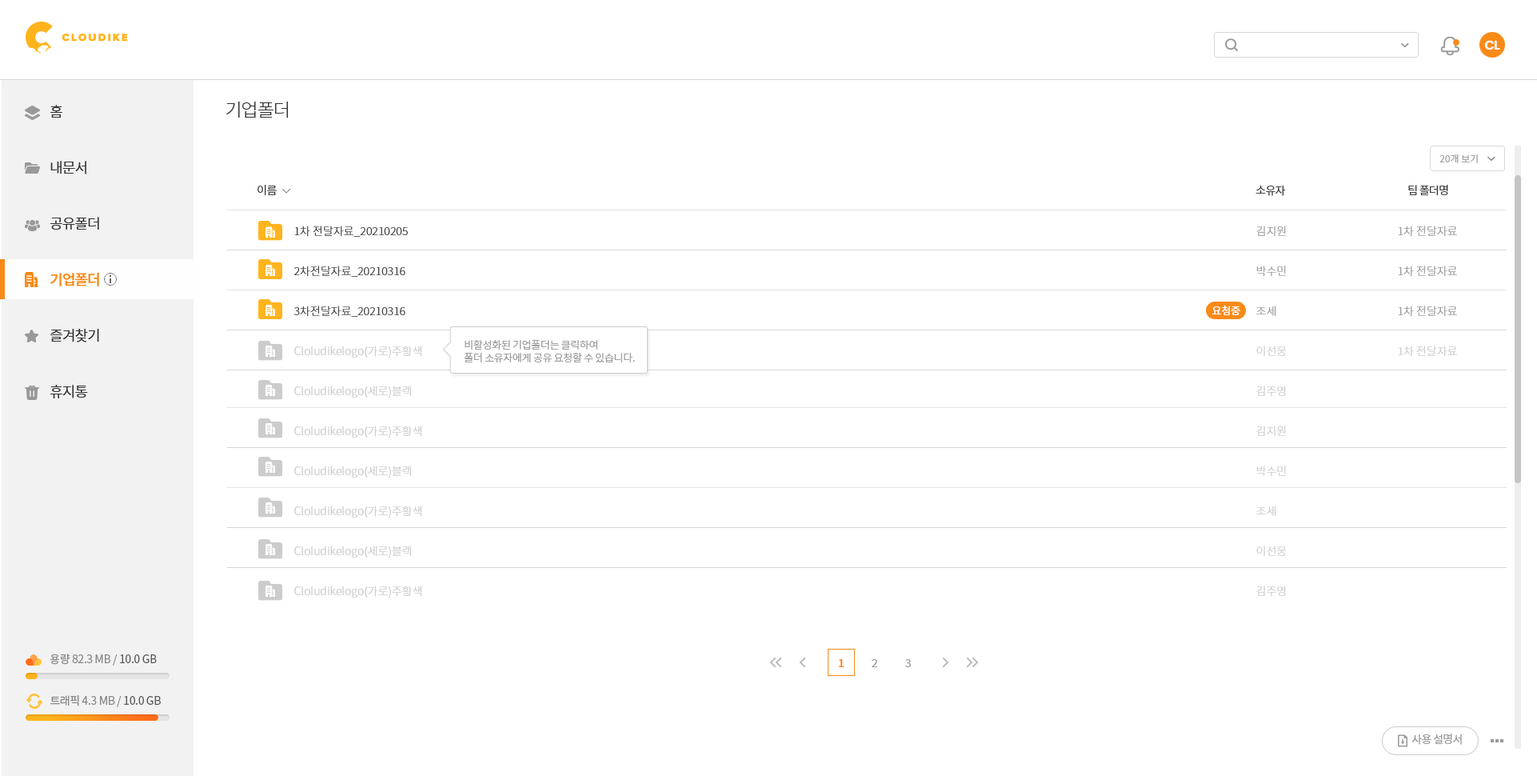
<style>
.page{position:relative;width:1537px;height:776px;background:#ffffff}
.page>*{position:absolute;margin:0}
.t1{font:12.8px "Poppins-SemiBold";letter-spacing:-0.05em;color:#ffffff}
.t2{font:18.4px "NotoSansCJKkr-Light";letter-spacing:-0.05em;color:#333333}
.t3{font:14.4px/56px "NotoSansCJKkr-DemiLight";letter-spacing:-0.05em;color:#333333}
.t4{font:14.4px/56px "NotoSansCJKkr-Medium";letter-spacing:-0.05em;color:#f98a17}
.t5{font:9.6px "NotoSansCJKkr-DemiLight";color:#a1a1a1}
.t6{font:11.2px "NotoSansCJKkr-DemiLight";letter-spacing:-0.05em;color:#333333}
.t7{font:11.2px/40px "NotoSansCJKkr-Light";color:#333333}
.t8{font:11.2px/40px "NotoSansCJKkr-Light";color:#cccccc}
.t9{font:11.2px/40px "NotoSansCJKkr-Light";color:#999999}
.t10{font:10.4px "NotoSansCJKkr-Medium";color:#ffffff}
.t11{font:10.4px/12.8px "NotoSansCJKkr-DemiLight";letter-spacing:-0.025em;color:#999999}
.t12{font:11.2px "NotoSansCJKkr-Regular";letter-spacing:-0.025em;color:#888888}
.t13{font:11.2px "NotoSansCJKkr-Regular";letter-spacing:-0.025em;color:#585858}
.t14{font:11.2px "NotoSansCJKkr-Medium";color:#f98a17}
.t15{font:11.2px "NotoSansCJKkr-DemiLight";color:#999999}
.t16{font:11.2px "NotoSansCJKkr-Regular";letter-spacing:-0.05em;color:#999999}
</style>
<div class="page">
<p class="t1" style="left:1484px;top:40px;width:16px;height:10px">CL</p>
<p class="t2" style="left:226px;top:101px;width:62px;height:17px">기업폴더</p>
<p class="t3" style="left:50px;top:105px;width:49px;height:293px">홈<br>내문서<br>공유폴더<br><span class="t4">기업폴더<br></span>즐겨찾기<br>휴지통</p>
<p class="t5" style="left:1440px;top:154px;width:38px;height:9px">20개 보기</p>
<p class="t6" style="left:258px;top:185px;width:19px;height:10px">이름</p>
<p class="t6" style="left:1256px;top:185px;width:29px;height:11px">소유자</p>
<p class="t6" style="left:1408px;top:185px;width:40px;height:10px">팀 폴더명</p>
<p class="t7" style="left:294px;top:226px;width:114px;height:91px">1차 전달자료_20210205<br>2차전달자료_20210316<br>3차전달자료_20210316</p>
<p class="t8" style="left:1256px;top:226px;width:31px;height:371px"><span class="t9">김지원<br>박수민<br>조세<br></span>이선웅<br>김주영<br>김지원<br>박수민<br>조세<br>이선웅<br>김주영</p>
<p class="t9" style="left:1398px;top:226px;width:59px;height:131px">1차 전달자료<br>1차 전달자료<br>1차 전달자료<br><span class="t8">1차 전달자료</span></p>
<p class="t10" style="left:1212px;top:306px;width:28px;height:9px">요청중</p>
<p class="t11" style="left:464px;top:340px;width:171px;height:23px">비활성화된 기업폴더는 클릭하여<br>폴더 소유자에게 공유 요청할 수 있습니다.</p>
<p class="t8" style="left:294px;top:345px;width:127px;height:252px">Cloludikelogo(가로)주황색<br>Cloludikelogo(세로)블랙<br>Cloludikelogo(가로)주황색<br>Cloludikelogo(세로)블랙<br>Cloludikelogo(가로)주황색<br>Cloludikelogo(세로)블랙<br>Cloludikelogo(가로)주황색</p>
<p class="t12" style="left:50px;top:653px;width:107px;height:12px">용량 82.3 MB / <span class="t13">10.0 GB</span></p>
<p class="t14" style="left:839px;top:659px;width:6px;height:8px">1</p>
<p class="t15" style="left:872px;top:659px;width:5px;height:8px">2</p>
<p class="t15" style="left:905px;top:659px;width:6px;height:8px">3</p>
<p class="t12" style="left:50px;top:695px;width:111px;height:12px">트래픽 4.3 MB / <span class="t13">10.0 GB</span></p>
<p class="t16" style="left:1412px;top:733px;width:50px;height:12px">사용 설명서</p>
</div>
